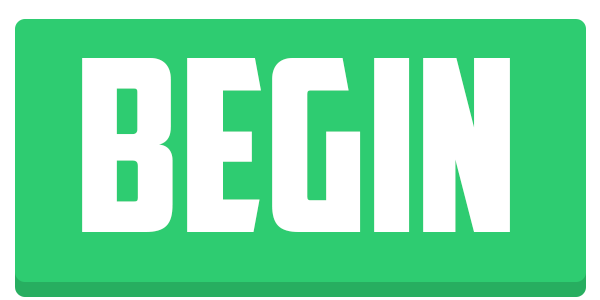
<style>
.page{position:relative;width:600px;height:300px;background:#2ecc71}
.page>*{position:absolute;margin:0}
.t1{font:240px "AmericanCaptain";color:#ffffff}
</style>
<div class="page">
<p class="t1" style="left:82px;top:58px;width:428px;height:174px">BEGIN</p>
</div>
